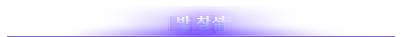
<style>
.page{position:relative;width:402px;height:37px;background:#ffffff}
.page>*{position:absolute;margin:0}
.t1{font:15px "MalgunGothicBold"}
</style>
<div class="page">
<p class="t1" style="left:177px;top:16px;width:48px;height:14px">방 창설</p>
</div>
